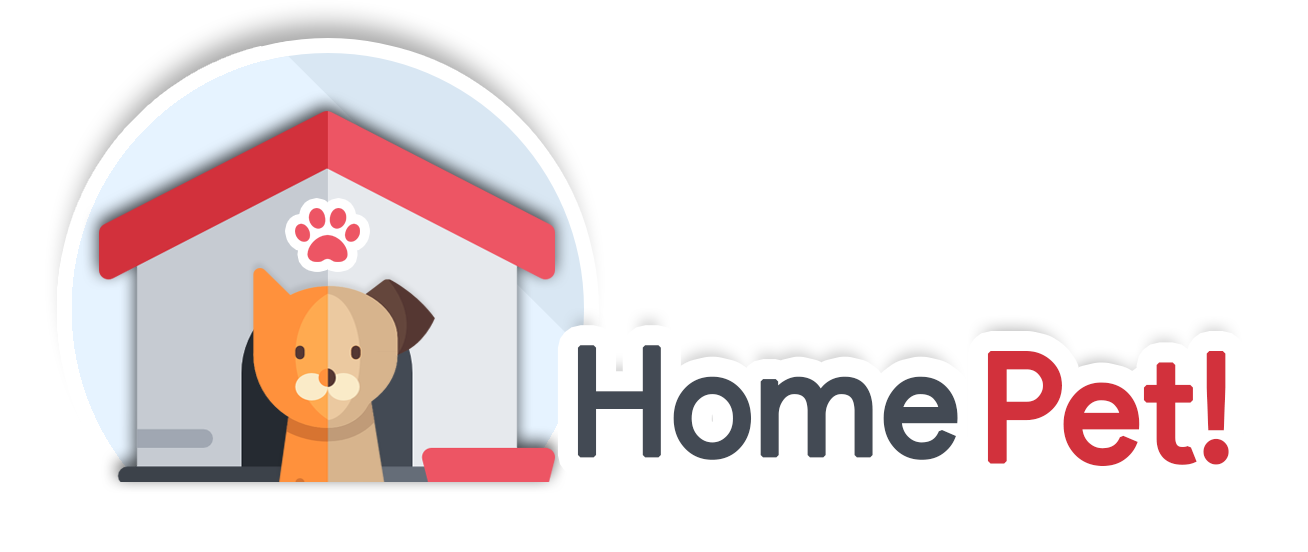
<style>
.page{position:relative;width:1308px;height:552px;background:#ffffff}
.page>*{position:absolute;margin:0}
.t1{font:150px "ProductSans-Regular";color:#434a54;font-weight:bold;scale:0.96 1}
.t2{font:150px "ProductSans-Regular";color:#d2313c;font-weight:bold}
</style>
<div class="page">
<p class="t1" style="left:577px;top:345px;width:381px;height:115px">Home</p>
<p class="t2" style="left:987px;top:351px;width:242px;height:115px">Pet!</p>
</div>
